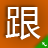
<style>
.page{position:relative;width:48px;height:48px}
.page>*{position:absolute;margin:0}
.t1{font:36px "MicrosoftYaHei";color:#ffffff}
.t2{font:7.4px "MicrosoftYaHei";color:#ffffff}
</style>
<div class="page">
<p class="t1" style="left:5px;top:7px;width:36px;height:33px">跟</p>
<p class="t2" style="left:42px;top:42px;width:5px;height:5px;rotate:-44deg">t</p>
</div>
